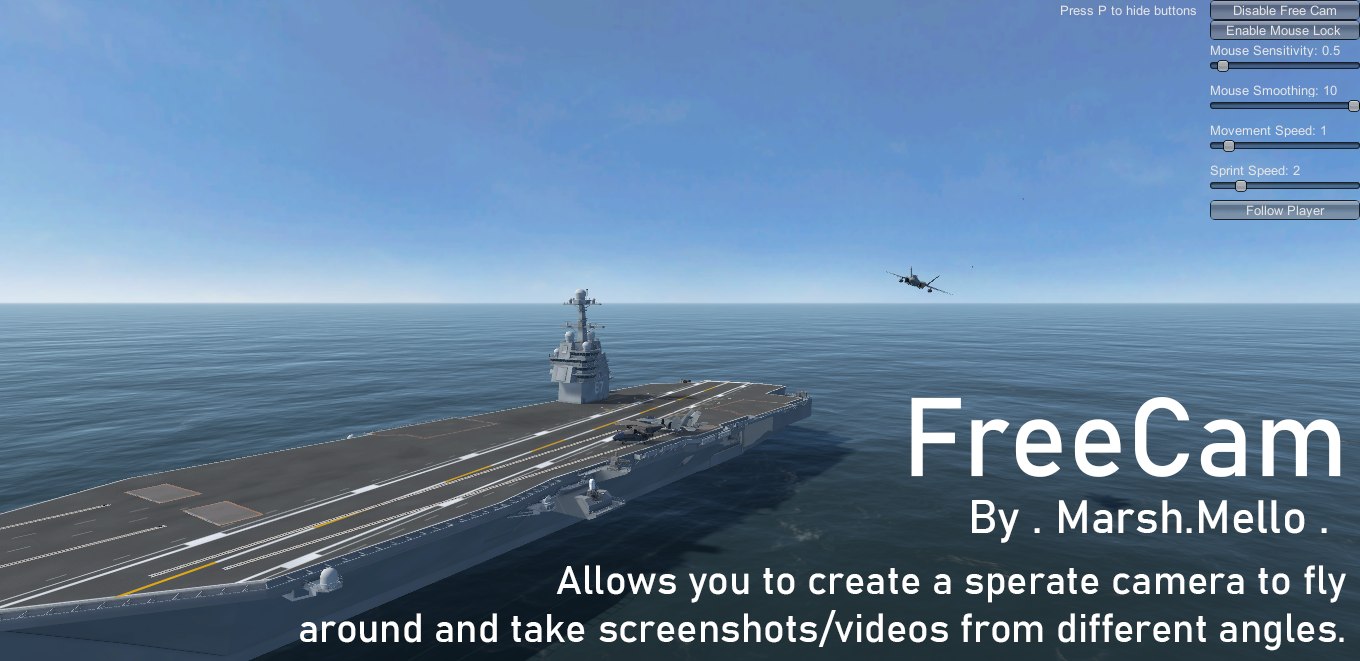
<style>
.page{position:relative;width:1360px;height:661px}
.page>*{position:absolute;margin:0}
.t1{font:110px "Bahnschrift";color:#ffffff}
.t2{font:46px "Bahnschrift";color:#ffffff}
.t3{font:40px "Bahnschrift";color:#ffffff}
</style>
<div class="page">
<p class="t1" style="left:911px;top:397px;width:430px;height:80px">FreeCam</p>
<p class="t2" style="left:972px;top:500px;width:355px;height:43px">By . Marsh.Mello .</p>
<p class="t3" style="left:300px;top:565px;width:1046px;height:86px;text-align:right">Allows you to create a sperate camera to fly<br>around and take screenshots/videos from different angles.</p>
</div>
